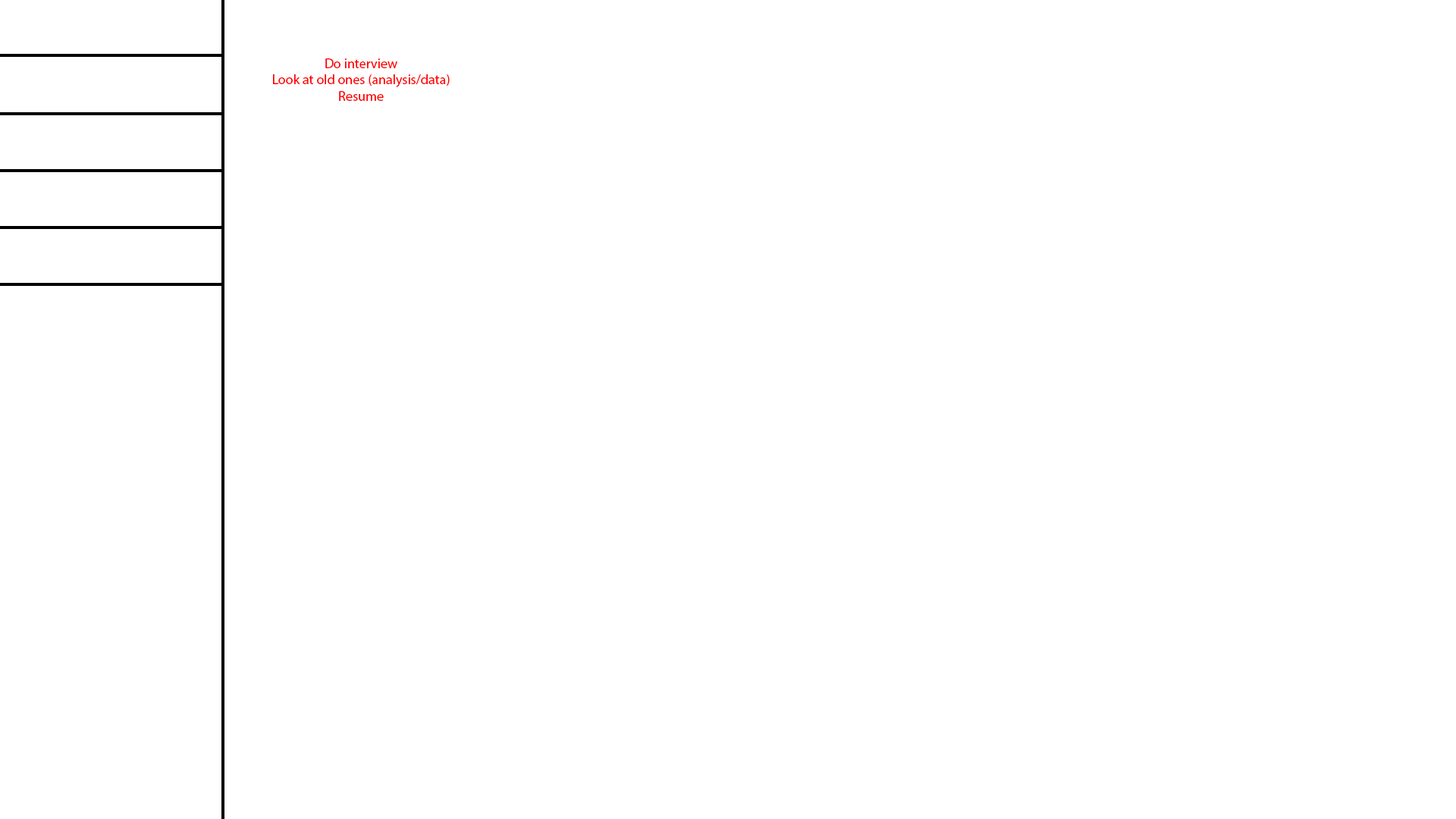
<style>
.page{position:relative;width:1456px;height:819px;background:#ffffff}
.page>*{position:absolute;margin:0}
.t1{font:13.6px "MyriadPro-Regular";color:#ff0000}
</style>
<div class="page">
<p class="t1" style="left:273px;top:58px;width:177px;height:43px;text-align:center">Do interview<br>Look at old ones (analysis/data)<br>Resume</p>
</div>
